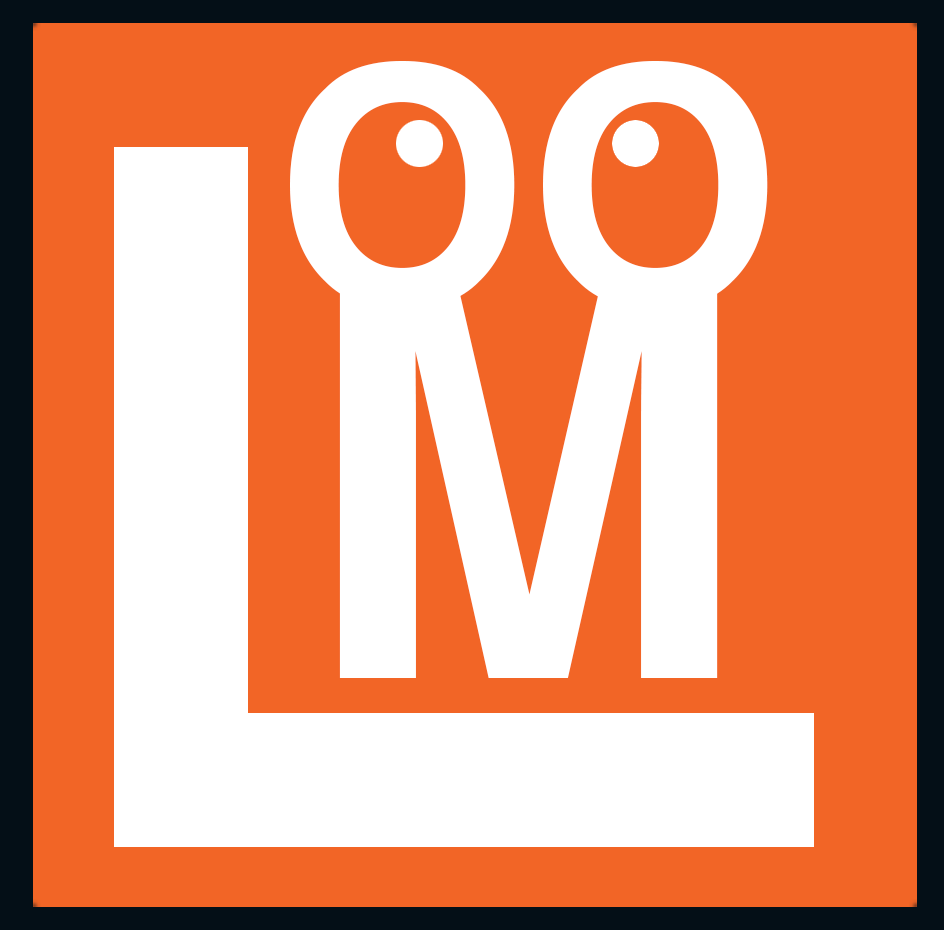
<style>
.page{position:relative;width:944px;height:930px;background:#f26526}
.page>*{position:absolute;margin:0}
.t1{font:325.3px "Helvetica-Bold";color:#ffffff}
.t2{font:542.2px "Helvetica-Bold";color:#ffffff}
</style>
<div class="page">
<p class="t1" style="left:290px;top:61px;width:478px;height:248px">OO</p>
<p class="t2" style="left:339px;top:288px;width:379px;height:390px">M</p>
</div>
